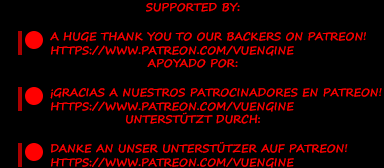
<style>
.page{position:relative;width:384px;height:168px;background:#000000}
.page>*{position:absolute;margin:0}
.t1{font:11px "SegoePrint-Bold";color:#ff0000}
.t2{font:11px/14px "SegoePrint-Bold";color:#ff0000}
</style>
<div class="page">
<p class="t1" style="left:146px;top:2px;width:94px;height:10px">SUPPORTED BY:</p>
<p class="t2" style="left:50px;top:32px;width:316px;height:24px">A HUGE THANK YOU TO OUR BACKERS ON PATREON!<br>HTTPS://WWW.PATREON.COM/VUENGINE</p>
<p class="t1" style="left:147px;top:58px;width:91px;height:10px">APOYADO POR:</p>
<p class="t2" style="left:50px;top:88px;width:332px;height:24px">¡GRACIAS A NUESTROS PATROCINADORES EN PATREON!<br>HTTPS://WWW.PATREON.COM/VUENGINE</p>
<p class="t1" style="left:126px;top:112px;width:134px;height:12px">UNTERSTÜTZT DURCH:</p>
<p class="t2" style="left:51px;top:142px;width:297px;height:26px">DANKE AN UNSER UNTERSTÜTZER AUF PATREON!<br>HTTPS://WWW.PATREON.COM/VUENGINE</p>
</div>
